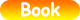
<style>
.page{position:relative;width:80px;height:20px}
.page>*{position:absolute;margin:0}
.t1{font:18px "ComicSansMS-Bold";color:#ffffff}
</style>
<div class="page">
<p class="t1" style="left:21px;top:2px;width:39px;height:15px">Book</p>
</div>
